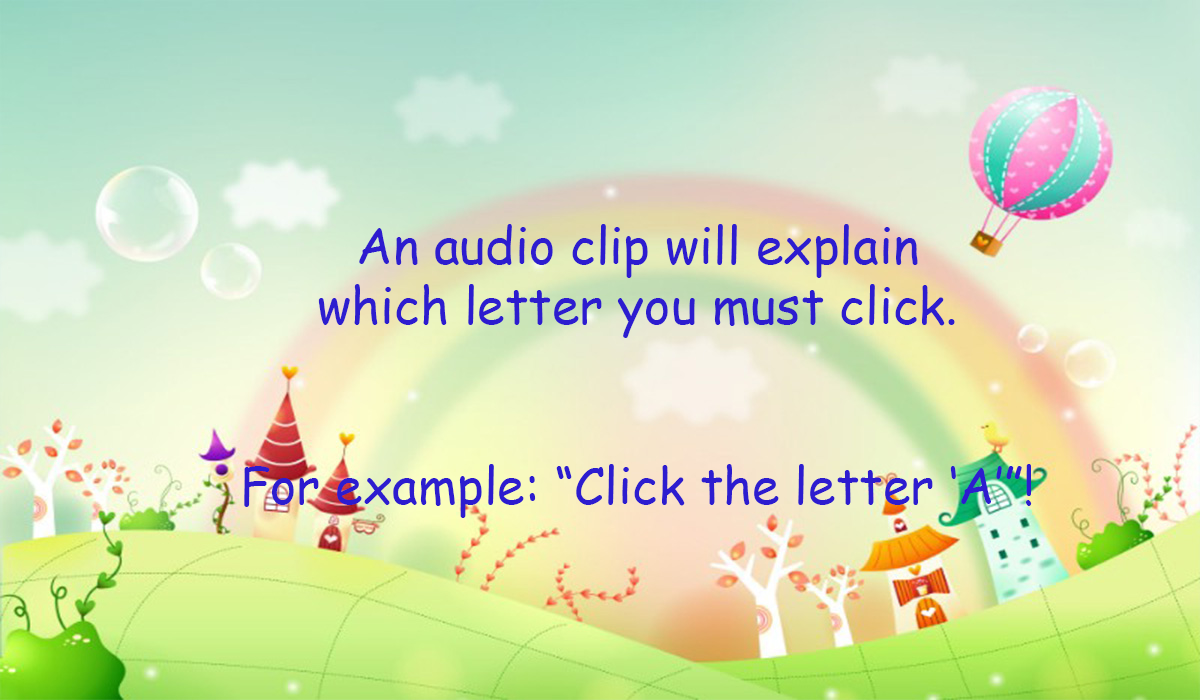
<style>
.page{position:relative;width:1200px;height:700px}
.page>*{position:absolute;margin:0}
.t1{font:12px "ComicSansMS";color:#2d1ccf}
</style>
<div class="page">
<p class="t1" style="left:244px;top:224px;width:788px;height:294px;text-align:center">An audio clip will explain<br>which letter you must click.<br><br><br>For example: “Click the letter ‘A’”!</p>
</div>
